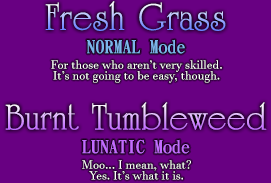
<style>
.page{position:relative;width:271px;height:183px;background:#680082}
.page>*{position:absolute;margin:0}
.t1{font:40px "Opera-";font-weight:bold}
.t2{font:18px "DFKaiSho-Bd-WIN-RKSJ-H";color:#7cb4ec}
.t3{font:12px "JavaneseText";color:#ffffff}
.t4{font:38px "Opera-";font-weight:bold}
.t5{font:18px "DFKaiSho-Bd-WIN-RKSJ-H";color:#c36aff}
</style>
<div class="page">
<p class="t1" style="left:45px;top:1px;width:181px;height:30px">Fresh Grass</p>
<p class="t2" style="left:87px;top:39px;width:98px;height:15px">NORMAL Mode</p>
<p class="t3" style="left:51px;top:60px;width:171px;height:23px;text-align:center">For those who aren’t very skilled.<br>It’s not going to be easy, though.</p>
<p class="t4" style="left:5px;top:102px;width:262px;height:28px"><span class="t1"><br><br></span>Burnt Tumbleweed</p>
<p class="t5" style="left:82px;top:139px;width:108px;height:15px">LUNATIC Mode</p>
<p class="t3" style="left:82px;top:160px;width:109px;height:20px;text-align:center">Moo... I mean, what?<br>Yes. It’s what it is.</p>
</div>
